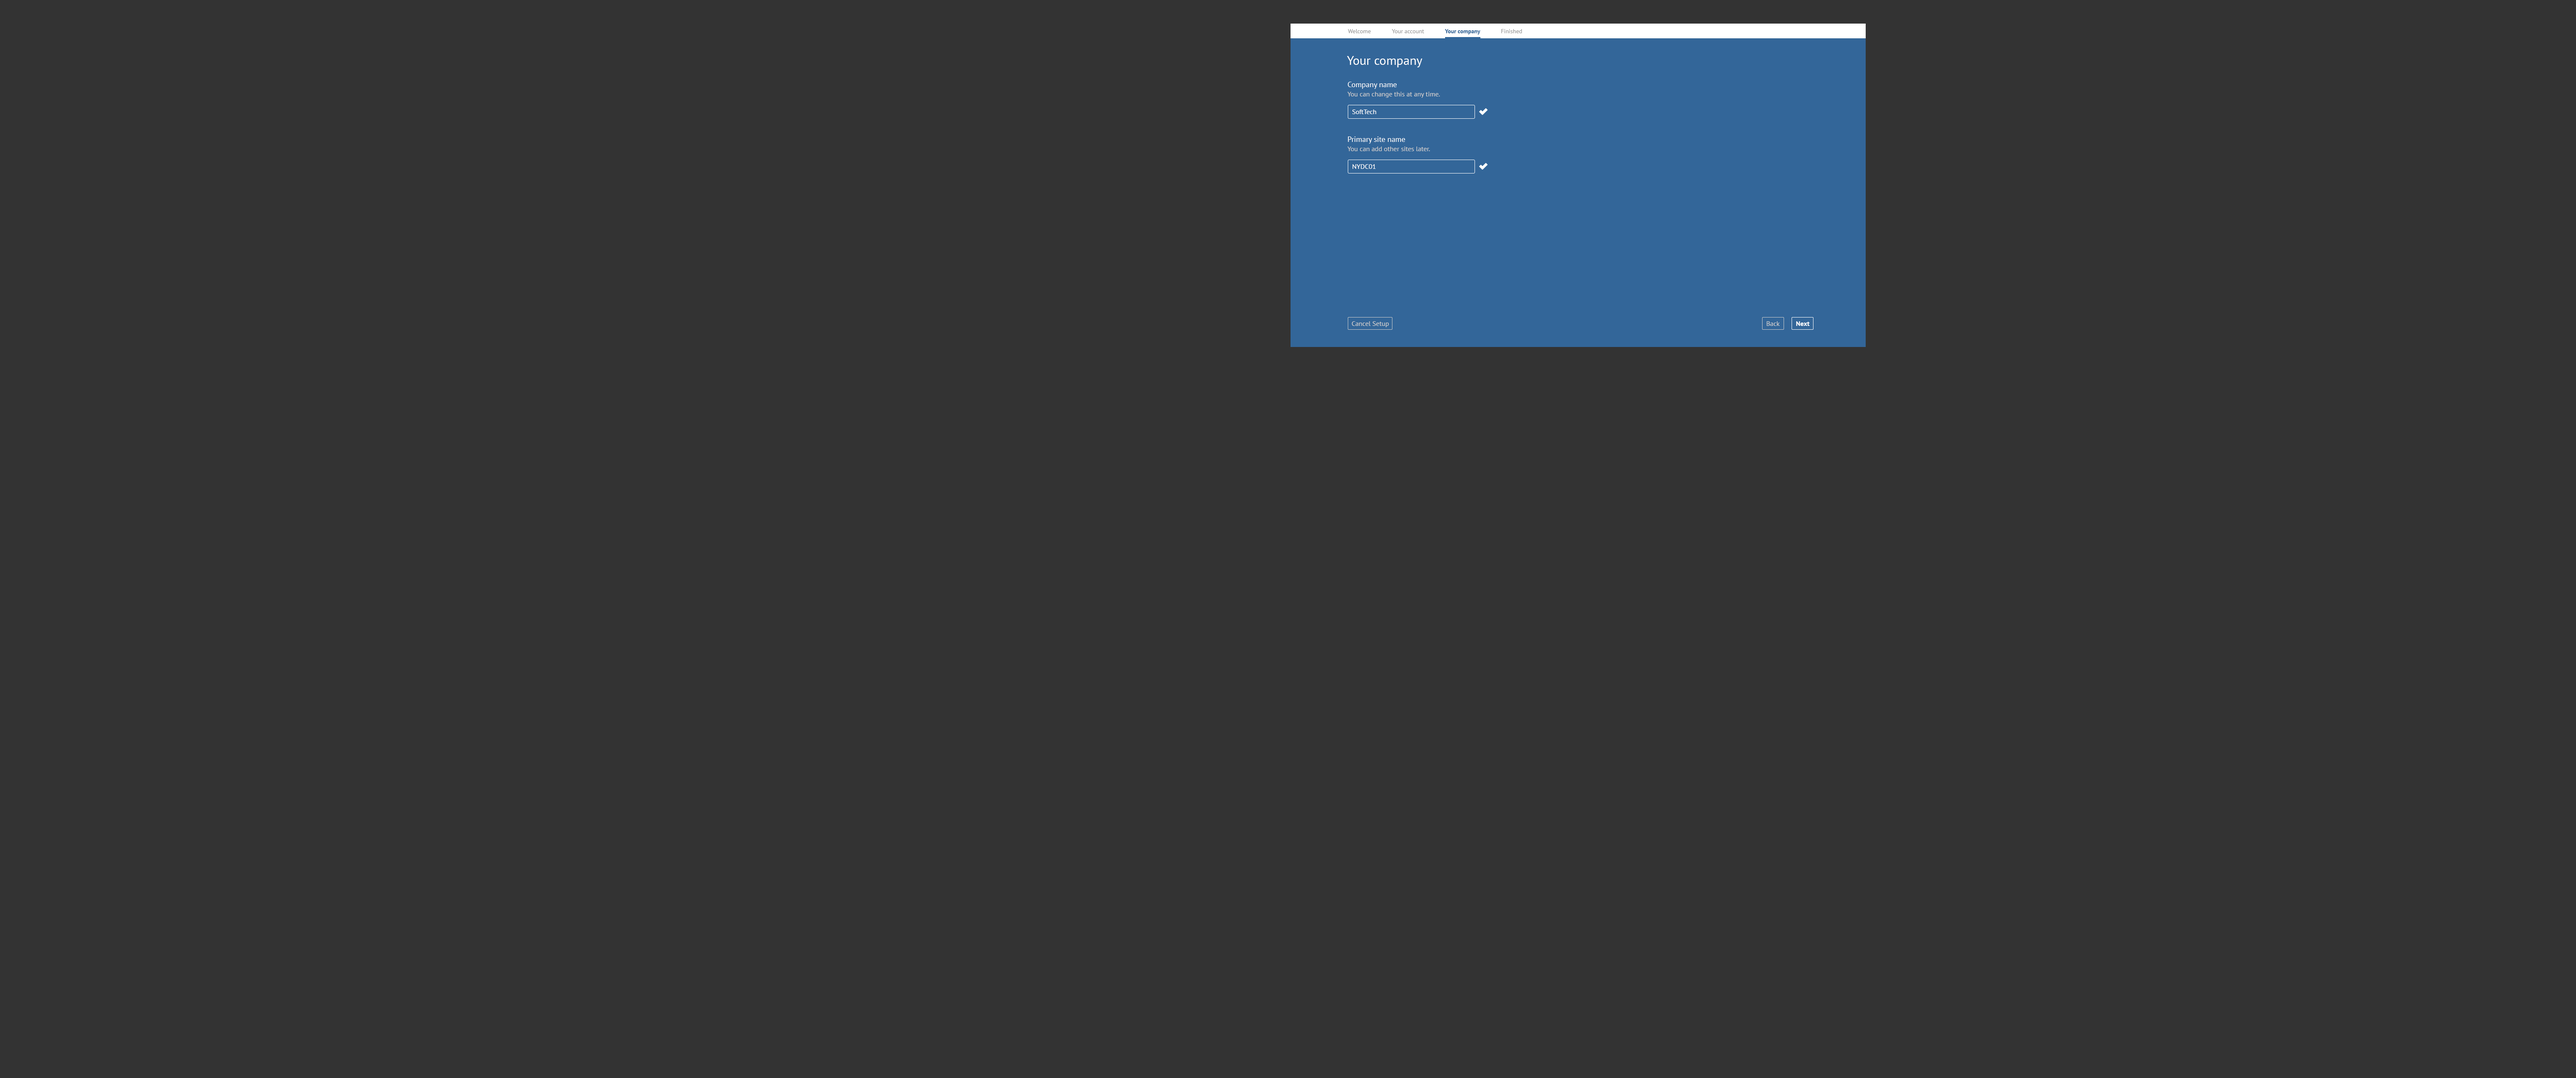
<style>
.page{position:relative;width:2576px;height:1078px;background:#333333}
.page>*{position:absolute;margin:0}
.t1{font:5.9px "PTSans-Regular";color:#999999}
.t2{font:5.9px "PTSans-Bold";color:#336699}
.t3{font:12.6px "PTSans-Regular";color:#ffffff}
.t4{font:7.6px "PTSans-Regular";color:#ffffff}
.t5{font:6.7px "PTSans-Regular";color:#cccccc}
.t6{font:6.7px "PTSans-Regular";color:#ffffff}
.t7{font:6.7px "PTSans-Bold";color:#ffffff}
</style>
<div class="page">
<p class="t1" style="left:1348px;top:29px;width:23px;height:4px">Welcome</p>
<p class="t1" style="left:1392px;top:29px;width:32px;height:4px">Your account</p>
<p class="t2" style="left:1445px;top:29px;width:35px;height:6px">Your company</p>
<p class="t1" style="left:1501px;top:29px;width:21px;height:4px">Finished</p>
<p class="t3" style="left:1347px;top:56px;width:75px;height:11px">Your company</p>
<p class="t4" style="left:1348px;top:82px;width:49px;height:7px">Company name</p>
<p class="t5" style="left:1347px;top:92px;width:93px;height:6px">You can change this at any time.</p>
<p class="t6" style="left:1352px;top:109px;width:24px;height:5px">SoftTech</p>
<p class="t4" style="left:1348px;top:136px;width:57px;height:8px">Primary site name</p>
<p class="t5" style="left:1347px;top:147px;width:83px;height:4px">You can add other sites later.</p>
<p class="t6" style="left:1352px;top:164px;width:24px;height:5px">NYDC01</p>
<p class="t5" style="left:1352px;top:321px;width:37px;height:6px">Cancel Setup</p>
<p class="t5" style="left:1767px;top:321px;width:13px;height:5px">Back</p>
<p class="t7" style="left:1796px;top:321px;width:14px;height:5px">Next</p>
</div>
